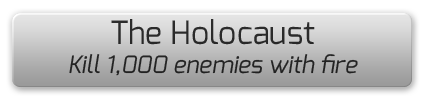
<style>
.page{position:relative;width:425px;height:100px}
.page>*{position:absolute;margin:0}
.t1{font:24px "Exo-Italic";color:#282828}
.t2{font:32px "Exo-Regular";color:#282828}
</style>
<div class="page">
<p class="t1" style="left:69px;top:19px;width:289px;height:57px;text-align:center"><span class="t2">The Holocaust<br></span>Kill 1,000 enemies with fire</p>
</div>
